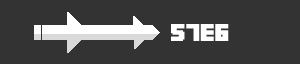
<style>
.page{position:relative;width:300px;height:64px;background:#333333}
.page>*{position:absolute;margin:0}
.t1{font:21.8px "Minecrafter";color:#ffffff}
</style>
<div class="page">
<p class="t1" style="left:171px;top:24px;width:58px;height:17px">57E6</p>
</div>
